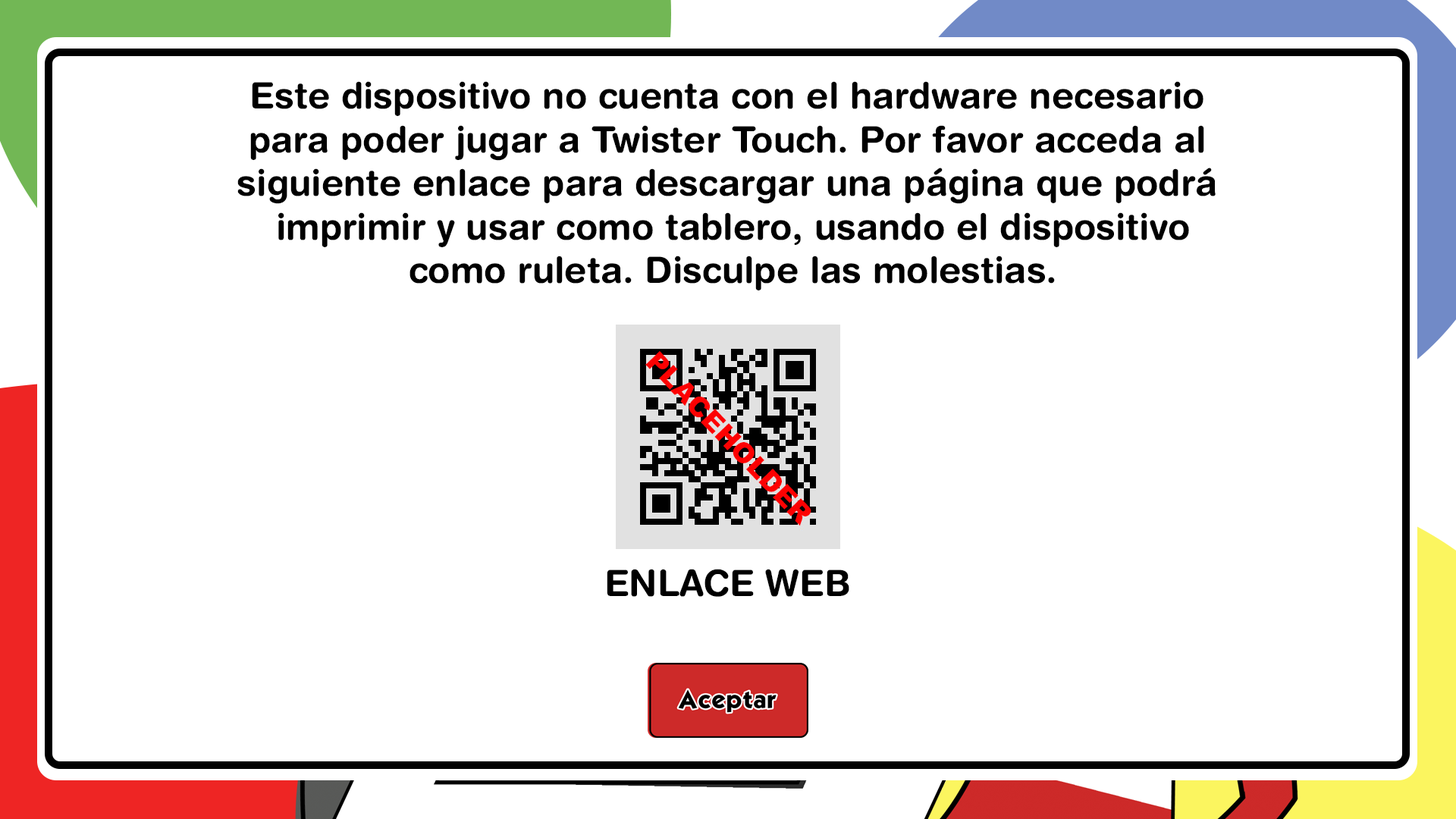
<style>
.page{position:relative;width:1456px;height:819px;background:#ffffff}
.page>*{position:absolute;margin:0}
.t1{font:36.4px "HelveticaRounded-Bold";color:#000000}
</style>
<div class="page">
<p class="t1" style="left:237px;top:81px;width:979px;height:209px;text-align:center">Este dispositivo no cuenta con el hardware necesario<br>para poder jugar a Twister Touch. Por favor acceda al<br>siguiente enlace para descargar una página que podrá<br> imprimir y usar como tablero, usando el dispositivo<br> como ruleta. Disculpe las molestias.</p>
<p class="t1" style="left:607px;top:569px;width:242px;height:28px">ENLACE WEB</p>
</div>
